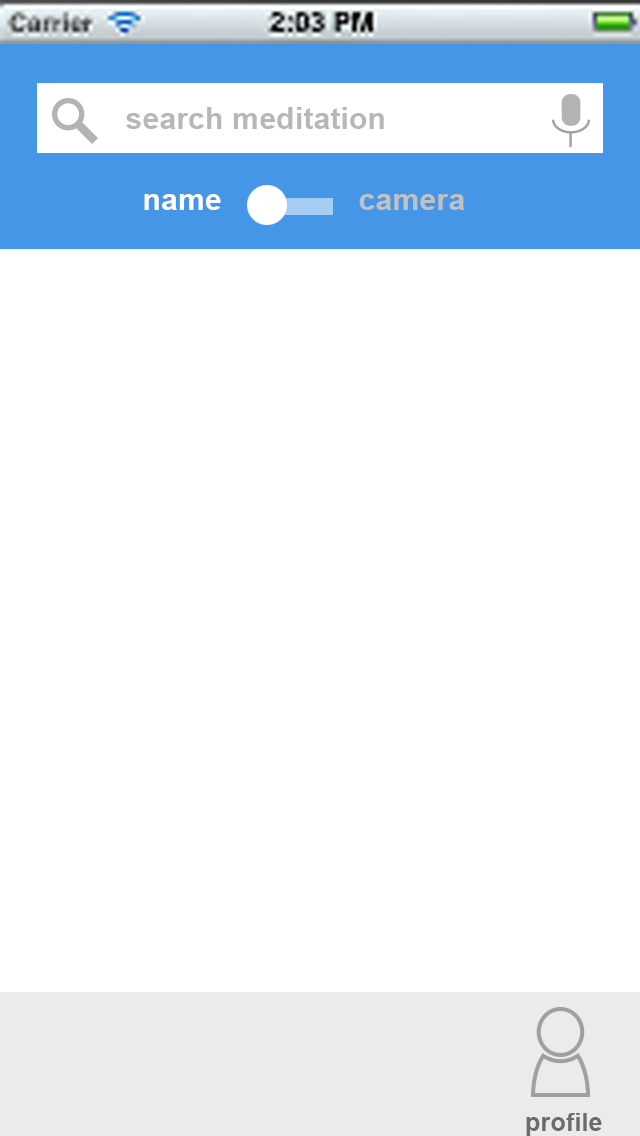
<style>
.page{position:relative;width:640px;height:1136px;background:#ffffff}
.page>*{position:absolute;margin:0}
.t1{font:30.5px "Arial-BoldMT";color:#b7b7b7}
.t2{font:12px "Arial-BoldMT";color:#ffffff}
.t3{font:12px "Arial-BoldMT";color:#c2c2c2}
.t4{font:25.4px "Arial-BoldMT";color:#6c6c6c}
</style>
<div class="page">
<p class="t1" style="left:126px;top:107px;width:258px;height:22px">search meditation</p>
<p class="t2" style="left:144px;top:194px;width:77px;height:16px">name</p>
<p class="t3" style="left:359px;top:194px;width:106px;height:16px">camera</p>
<p class="t4" style="left:526px;top:1113px;width:76px;height:23px">profile</p>
</div>
